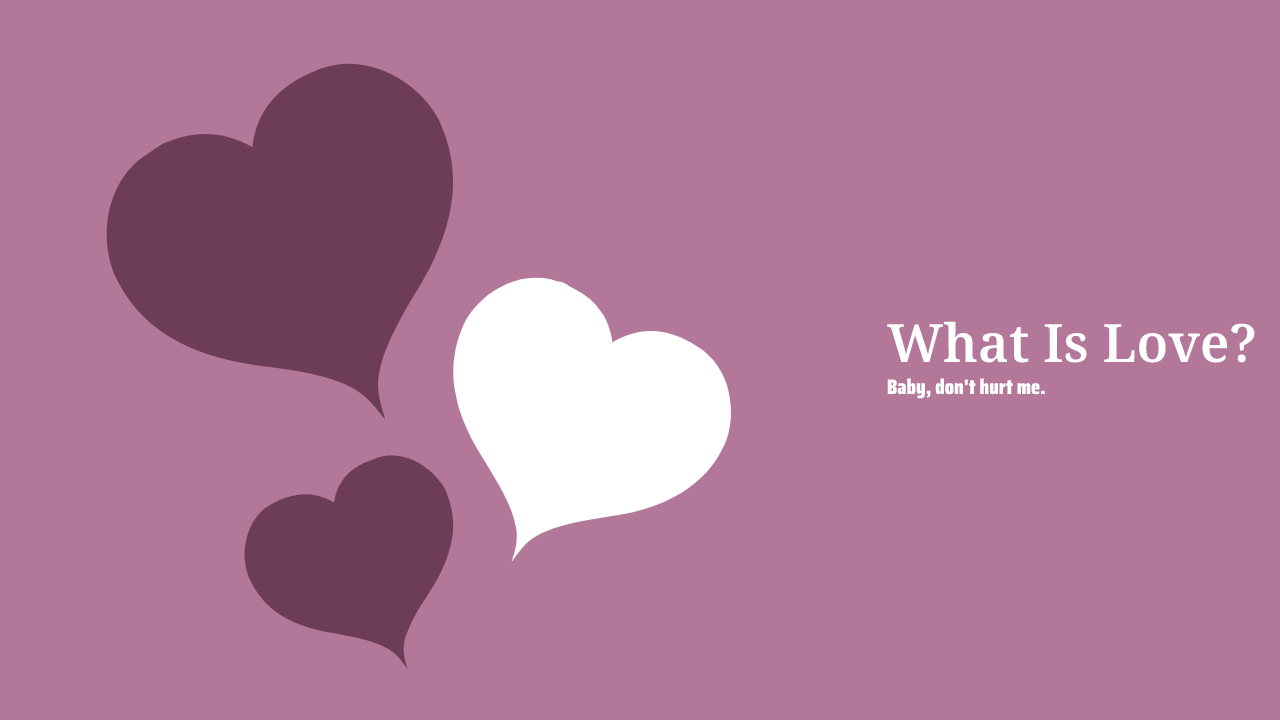
<style>
.page{position:relative;width:1280px;height:720px;background:#b37799}
.page>*{position:absolute;margin:0}
.t1{font:53px "NotoSerif-SemiBold";color:#ffffff}
.t2{font:21px "SairaCondensed-Black";color:#ffffff}
</style>
<div class="page">
<p class="t1" style="left:887px;top:321px;width:368px;height:42px">What Is Love?</p>
<p class="t2" style="left:887px;top:378px;width:158px;height:21px">Baby, don't hurt me.</p>
</div>
